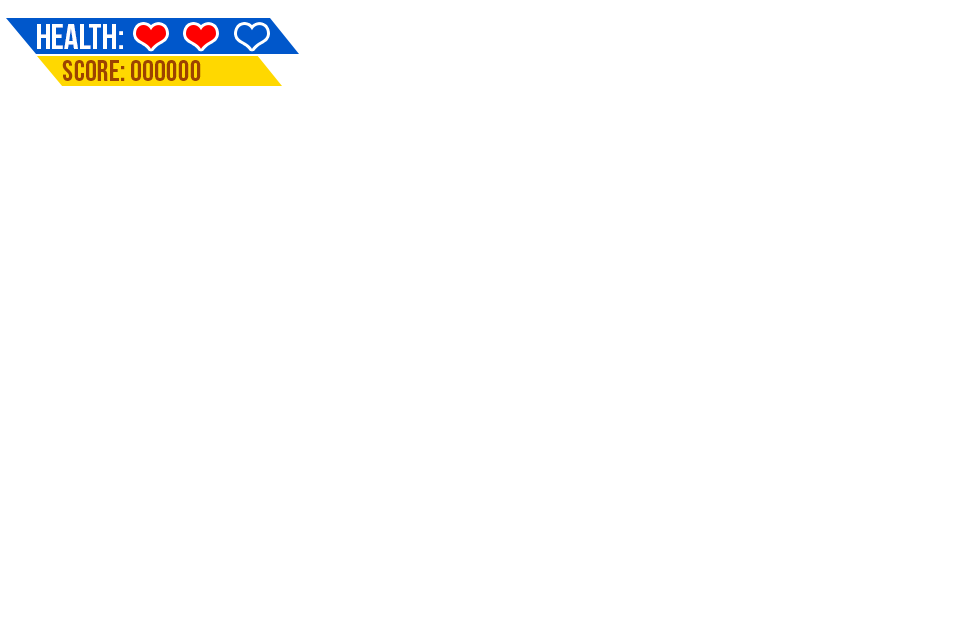
<style>
.page{position:relative;width:960px;height:640px;background:#ffffff}
.page>*{position:absolute;margin:0}
.t1{font:36px "BebasNeue";color:#ffffff;text-transform:uppercase}
.t2{font:30px "BebasNeue";color:#9d4300;text-transform:uppercase}
</style>
<div class="page">
<p class="t1" style="left:37px;top:24px;width:86px;height:25px">HEALTH:</p>
<p class="t2" style="left:62px;top:60px;width:139px;height:21px">SCORE: 000000</p>
</div>
